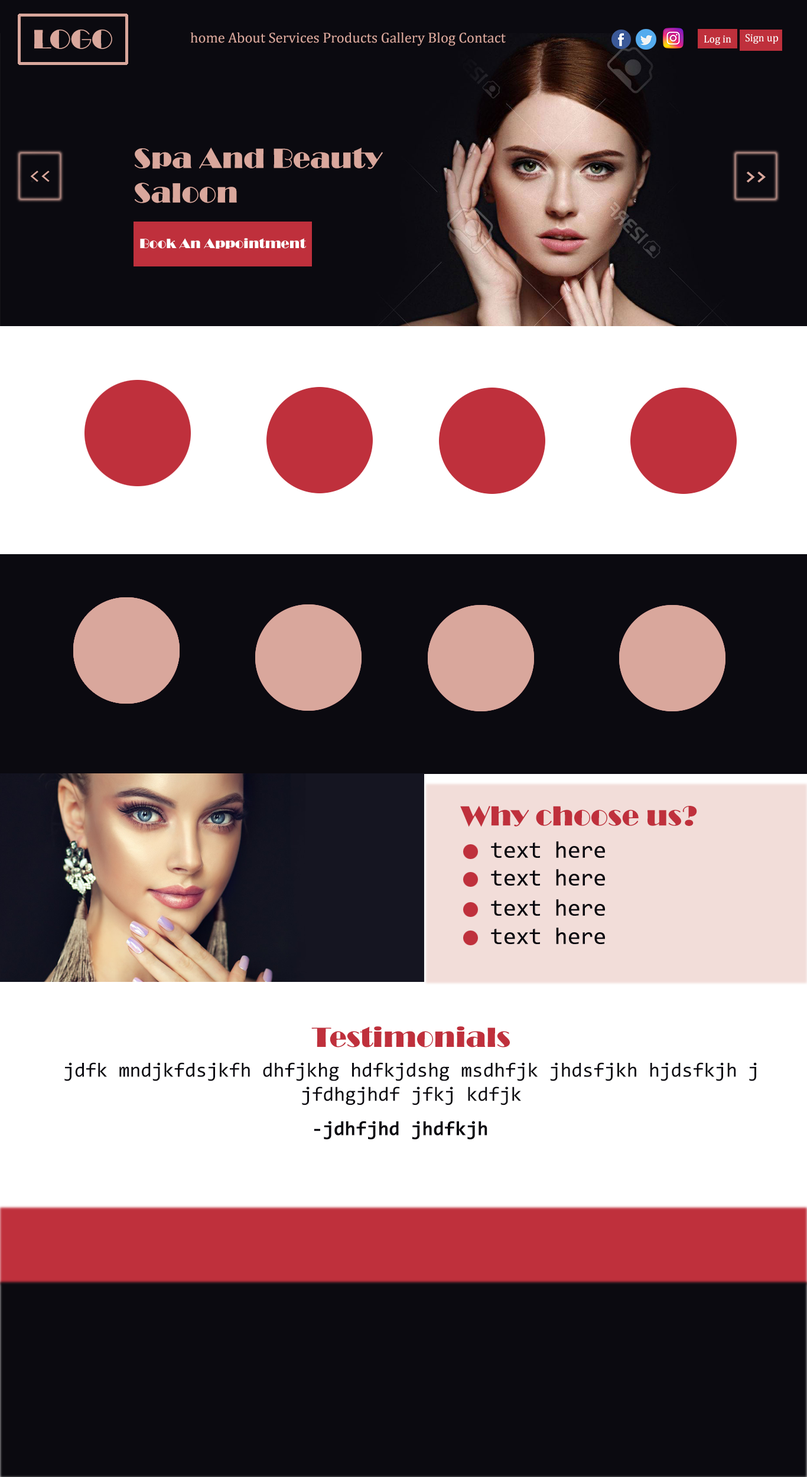
<style>
.page{position:relative;width:807px;height:1477px;background:#0b0a10}
.page>*{position:absolute;margin:0}
.t1{font:27.7px "Broadway";color:#d9a79c}
.t2{font:14.4px "Cambria";color:#d9a79c}
.t3{font:28.8px "Broadway";color:#d9a79c}
.t4{font:20.1px "Consolas";color:#d9a79c}
.t5{font:28.8px "Broadway";color:#bf303c}
.t6{font:20.1px "Consolas";color:#0b0a10}
.t7{font:20.1px "Consolas-Bold";color:#0b0a10}
</style>
<div class="page">
<p class="t1" style="left:34px;top:30px;width:78px;height:19px">LOGO</p>
<p class="t2" style="left:190px;top:33px;width:316px;height:13px">home About Services Products Gallery Blog Contact</p>
<p class="t3" style="left:135px;top:147px;width:248px;height:56px">Spa And Beauty <br>Saloon</p>
<p class="t4" style="left:30px;top:171px;width:20px;height:11px">&lt;&lt;</p>
<p class="t5" style="left:460px;top:805px;width:237px;height:22px">Why choose us?</p>
<p class="t5" style="left:311px;top:1026px;width:199px;height:22px">Testimonials</p>
<p class="t6" style="left:64px;top:1062px;width:693px;height:44px;text-align:center">jdfk mndjkfdsjkfh dhfjkhg hdfkjdshg msdhfjk jhdsfjkh hjdsfkjh j<br>jfdhgjhdf jfkj kdfjk</p>
<p class="t7" style="left:314px;top:1121px;width:174px;height:19px">-jdhfjhd jhdfkjh</p>
</div>
